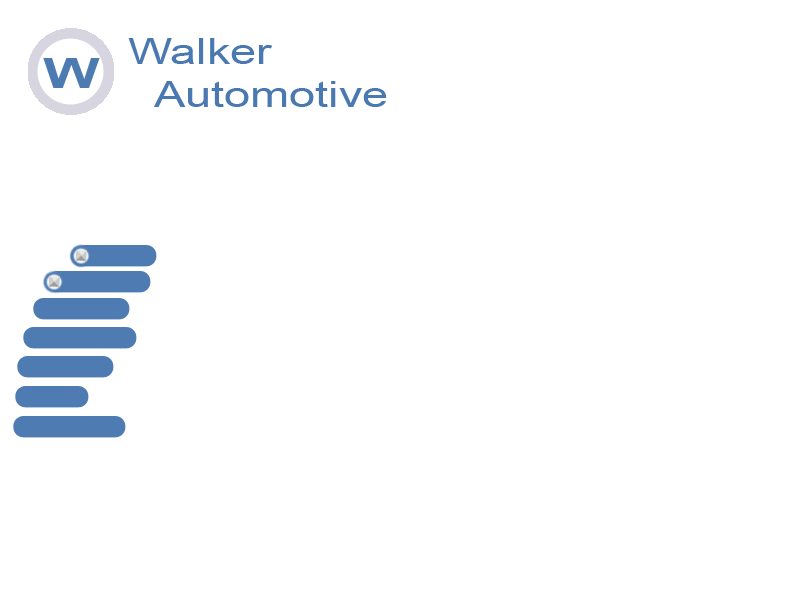
<style>
.page{position:relative;width:800px;height:600px;background:#ffffff}
.page>*{position:absolute;margin:0}
.t1{font:36px "ArialMT";color:#4a79b1;scale:1.3 1}
.t2{font:41.4px "Arial-BoldMT";color:#4c7bb2;scale:1.44 1}
</style>
<div class="page">
<p class="t1" style="left:128px;top:38px;width:259px;height:69px">Walker<br>  Automotive</p>
<p class="t2" style="left:43px;top:58px;width:57px;height:30px">W</p>
</div>
